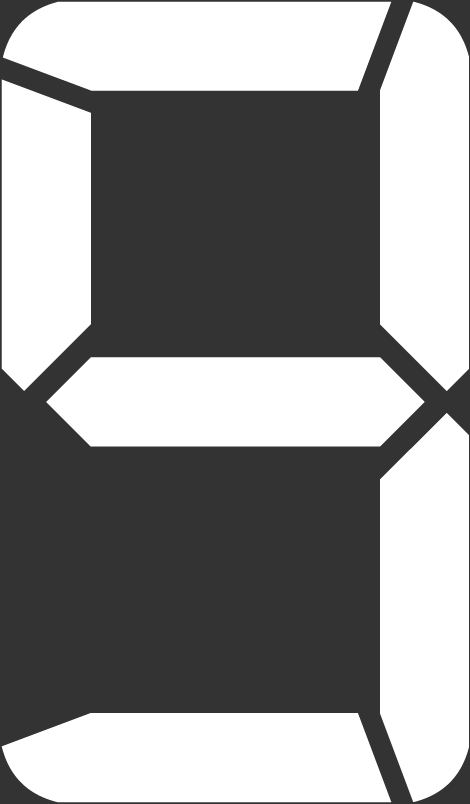
<style>
.page{position:relative;width:470px;height:804px;background:#333333}
.page>*{position:absolute;margin:0}
.t1{font:1222.5px "Digital-7";letter-spacing:0.02em;color:#ffffff}
</style>
<div class="page">
<p class="t1" style="left:1px;top:1px;width:468px;height:802px">9</p>
</div>
